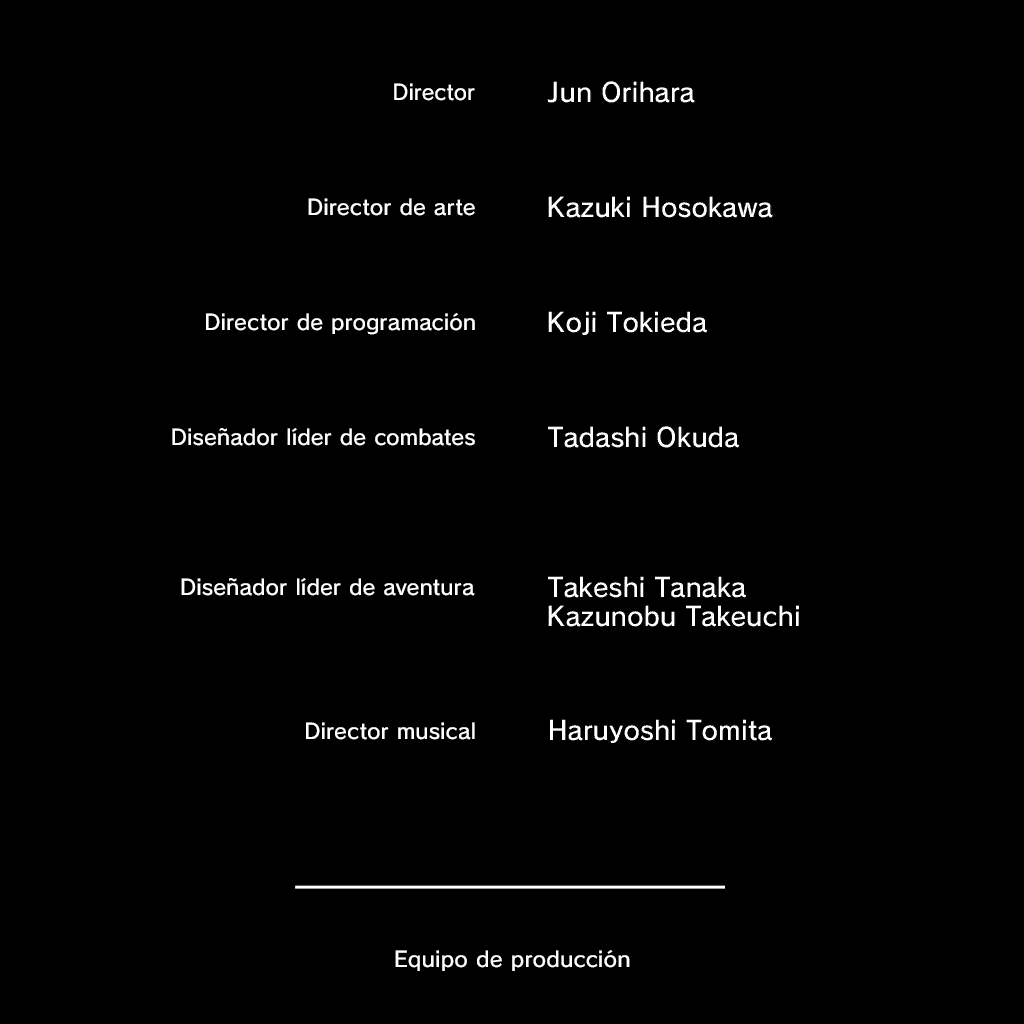
<style>
.page{position:relative;width:1024px;height:1024px;background:#000000}
.page>*{position:absolute;margin:0}
.t1{font:21px "SCEPS3RodinLATIN-Regular";letter-spacing:0.015em;color:#ffffff}
.t2{font:21px "SCEPS3RodinLATIN-Regular";letter-spacing:0.02em;color:#fefefe}
</style>
<div class="page">
<p class="t1" style="left:394px;top:83px;width:81px;height:18px">Director</p>
<p class="t1" style="left:308px;top:198px;width:167px;height:18px">Director de arte</p>
<p class="t1" style="left:206px;top:313px;width:269px;height:22px">Director de programación</p>
<p class="t1" style="left:172px;top:428px;width:303px;height:18px">Diseñador líder de combates</p>
<p class="t1" style="left:181px;top:578px;width:294px;height:18px">Diseñador líder de aventura</p>
<p class="t1" style="left:306px;top:722px;width:169px;height:18px">Director musical</p>
<p class="t2" style="left:395px;top:950px;width:235px;height:21px">Equipo de producción</p>
</div>
